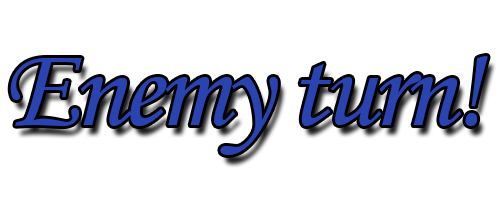
<style>
.page{position:relative;width:500px;height:200px;background:#ffffff}
.page>*{position:absolute;margin:0}
.t1{font:117.1px "MonotypeCorsiva";letter-spacing:-0.04em;color:#2943b0}
</style>
<div class="page">
<p class="t1" style="left:10px;top:56px;width:478px;height:99px">Enemy turn!</p>
</div>
